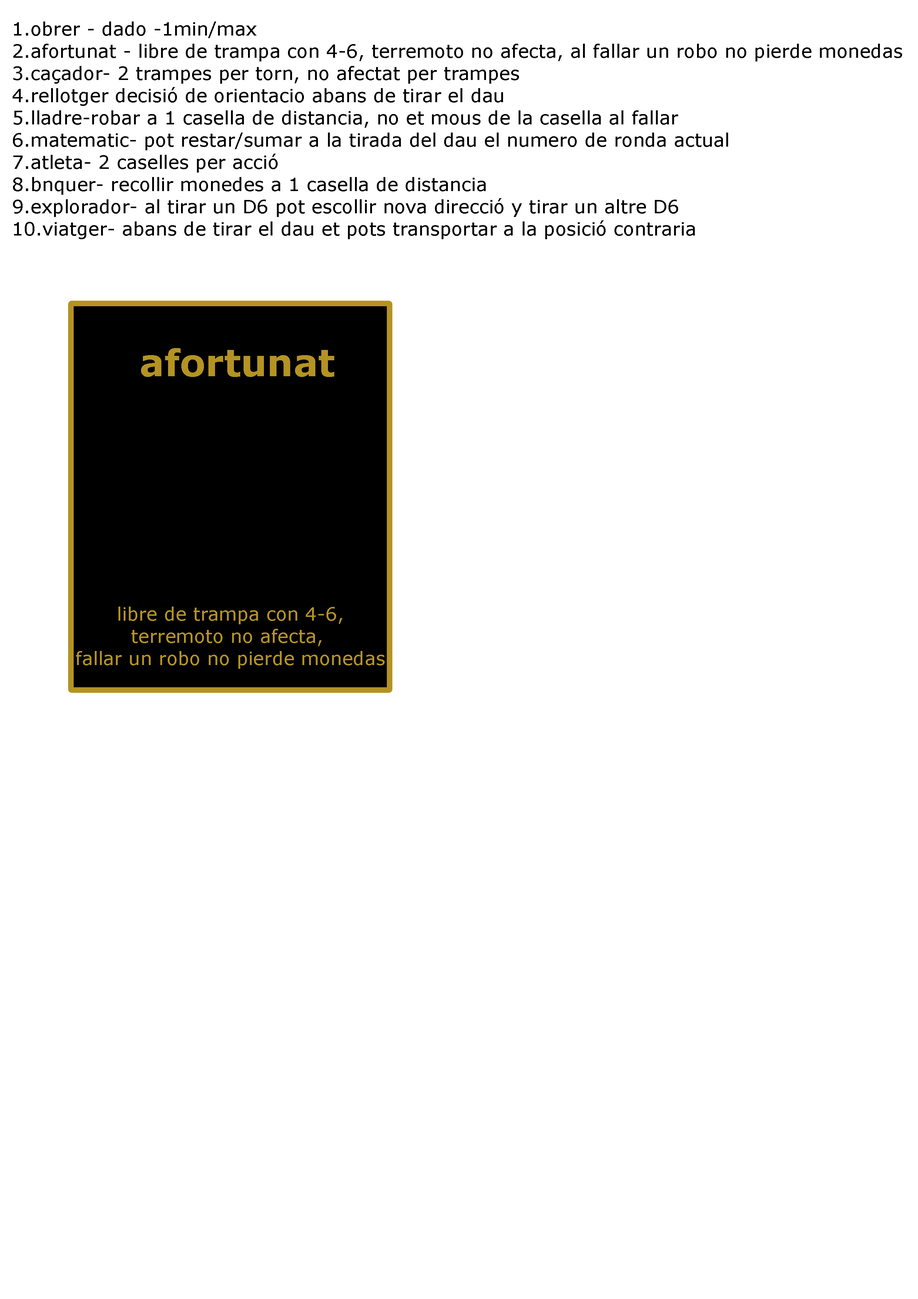
<style>
.page{position:relative;width:918px;height:1299px;background:#ffffff}
.page>*{position:absolute;margin:0}
.t1{font:18.5px "Verdana";color:#000000}
.t2{font:37px "Verdana-Bold";color:#b49323}
.t3{font:18.5px "Verdana";color:#b49323}
</style>
<div class="page">
<p class="t1" style="left:13px;top:21px;width:889px;height:218px">1.obrer - dado -1min/max<br>2.afortunat - libre de trampa con 4-6, terremoto no afecta, al fallar un robo no pierde monedas<br>3.caçador- 2 trampes per torn, no afectat per trampes<br>4.rellotger decisió de orientacio abans de tirar el dau<br>5.lladre-robar a 1 casella de distancia, no et mous de la casella al fallar<br>6.matematic- pot restar/sumar a la tirada del dau el numero de ronda actual<br>7.atleta- 2 caselles per acció<br>8.bnquer- recollir monedes a 1 casella de distancia<br>9.explorador- al tirar un D6 pot escollir nova direcció y tirar un altre D6<br>10.viatger- abans de tirar el dau et pots transportar a la posició contraria</p>
<p class="t2" style="left:141px;top:348px;width:193px;height:29px">afortunat</p>
<p class="t3" style="left:76px;top:606px;width:309px;height:63px;text-align:center">libre de trampa con 4-6, <br>terremoto no afecta, <br>fallar un robo no pierde monedas</p>
</div>
